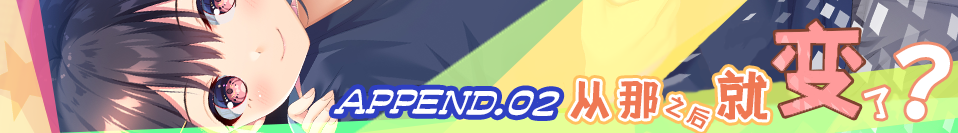
<style>
.page{position:relative;width:958px;height:133px}
.page>*{position:absolute;margin:0}
.t1{font:55px "shetumodengxiaofangti";letter-spacing:0.08em;color:#ef7853;text-transform:uppercase;font-weight:bold}
.t2{font:44.3px "shetumodengxiaofangti";letter-spacing:0.08em;color:#ef7853;text-transform:uppercase;font-weight:bold}
.t3{font:33.5px "shetumodengxiaofangti";letter-spacing:0.08em;color:#ffffff;text-transform:uppercase;font-weight:bold}
.t4{font:22.5px "shetumodengxiaofangti";letter-spacing:0.08em;color:#ef7853;text-transform:uppercase;font-weight:bold}
</style>
<div class="page">
<p class="t1" style="left:717px;top:70px;width:51px;height:50px">就</p>
<p class="t2" style="left:570px;top:81px;width:88px;height:38px">从那</p>
<p class="t3" style="left:864px;top:87px;width:25px;height:32px;rotate:-16deg">了</p>
<p class="t4" style="left:665px;top:97px;width:45px;height:32px;rotate:27deg">之后</p>
</div>
